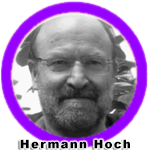
<style>
.page{position:relative;width:149px;height:150px}
.page>*{position:absolute;margin:0}
.t1{font:12px "Arial-Black";letter-spacing:0.1em;color:#000000}
</style>
<div class="page">
<p class="t1" style="left:20px;top:139px;width:110px;height:10px">Hermann Hoch</p>
</div>
